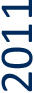
<style>
.page{position:relative;width:34px;height:93px;background:#ffffff}
.page>*{position:absolute;margin:0}
.t1{font:47.5px "Calibri";color:#002b5c}
</style>
<div class="page">
<p class="t1" style="left:1px;top:0px;width:32px;height:92px;rotate:-90deg">2011</p>
</div>
